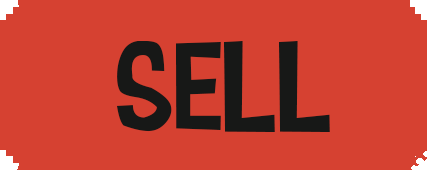
<style>
.page{position:relative;width:427px;height:170px;background:#d64131}
.page>*{position:absolute;margin:0}
.t1{font:167.6px "CartonsixNC";color:#171817}
</style>
<div class="page">
<p class="t1" style="left:116px;top:41px;width:214px;height:91px">Sell</p>
</div>
